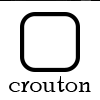
<style>
.page{position:relative;width:100px;height:100px;background:#ffffff}
.page>*{position:absolute;margin:0}
.t1{font:29.2px "PoorRichard-Regular"}
</style>
<div class="page">
<p class="t1" style="left:9px;top:75px;width:82px;height:16px">crouton</p>
</div>
